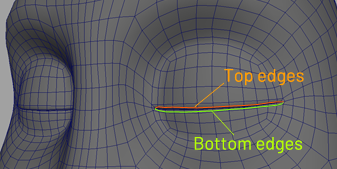
<style>
.page{position:relative;width:337px;height:169px}
.page>*{position:absolute;margin:0}
.t1{font:18px "Barlow-Regular";color:#ff9e05}
.t2{font:18px "Barlow-Regular";color:#b5ff04}
</style>
<div class="page">
<p class="t1" style="left:224px;top:69px;width:80px;height:17px">Top edges</p>
<p class="t2" style="left:194px;top:137px;width:109px;height:17px">Bottom edges</p>
</div>
